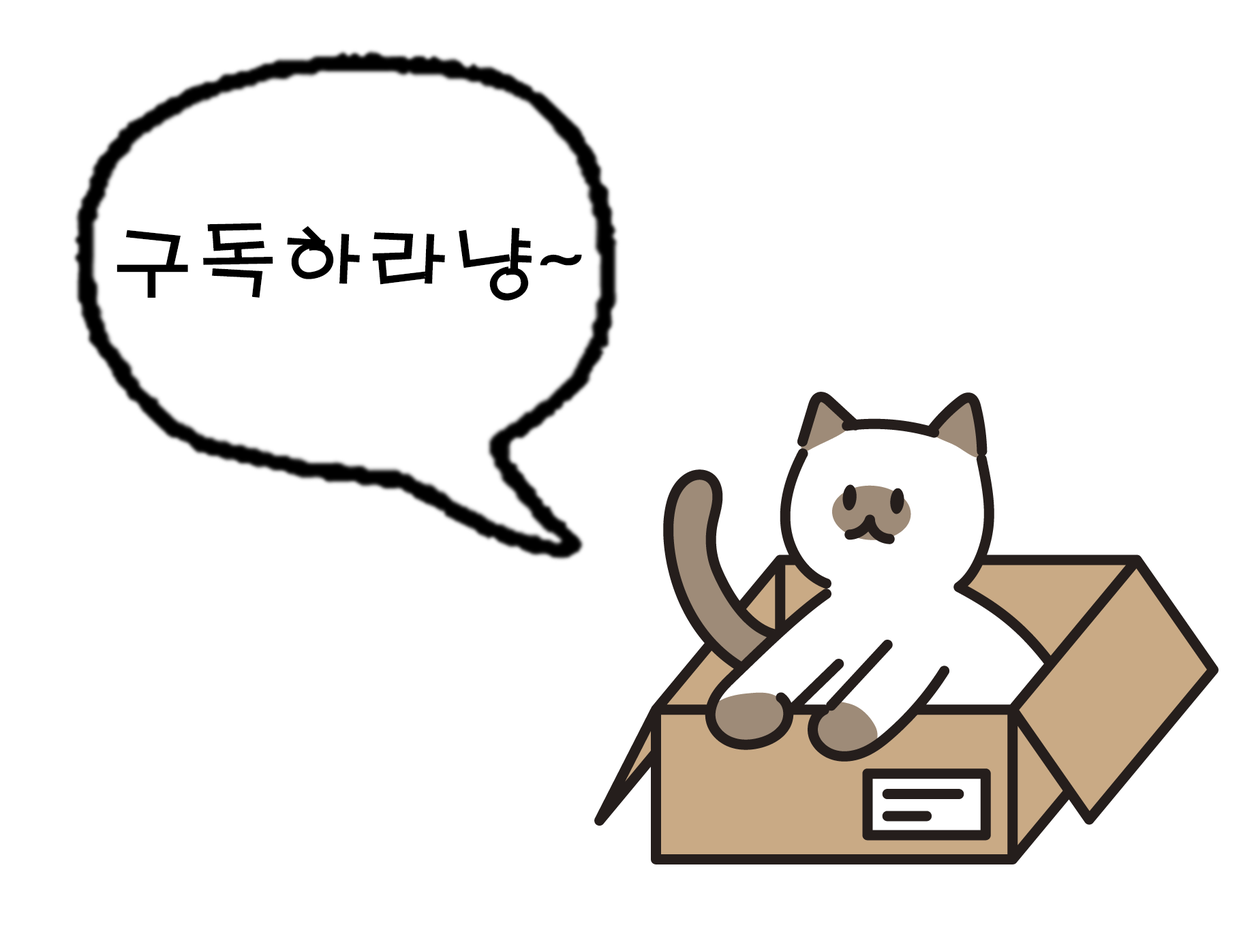
<style>
.page{position:relative;width:1254px;height:951px;background:#ffffff}
.page>*{position:absolute;margin:0}
.t1{font:85.2px "H2porM";color:#000000;text-transform:uppercase}
</style>
<div class="page">
<p class="t1" style="left:117px;top:223px;width:465px;height:77px">구독하라냥~</p>
</div>
